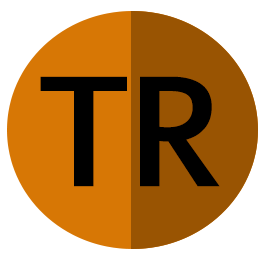
<style>
.page{position:relative;width:260px;height:260px;background:#ffffff}
.page>*{position:absolute;margin:0}
.t1{font:143px "EuphemiaUCAS-Bold";color:#000000}
</style>
<div class="page">
<p class="t1" style="left:40px;top:76px;width:180px;height:111px">TR</p>
</div>
